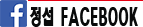
<style>
.page{position:relative;width:143px;height:27px;background:#ffffff}
.page>*{position:absolute;margin:0}
.t1{font:20.9px "HeadlineR-HM";color:#090a0a;scale:0.6 1}
</style>
<div class="page">
<p class="t1" style="left:29px;top:7px;width:109px;height:20px">정섭 FACEBOOK</p>
</div>
